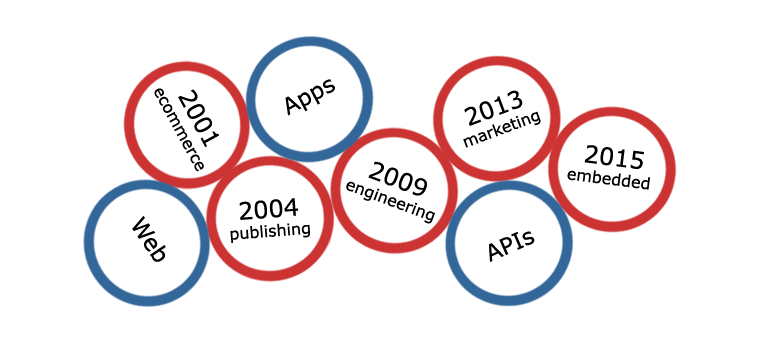
<style>
.page{position:relative;width:760px;height:342px;background:#ffffff}
.page>*{position:absolute;margin:0}
.t1{font:15.9px "Verdana";color:#000000}
.t2{font:23.9px "Verdana";color:#000000}
.t3{font:22.6px "Verdana";color:#000000}
</style>
<div class="page">
<p class="t1" style="left:154px;top:88px;width:65px;height:84px;text-align:center;rotate:61deg"><span class="t2">2001<br></span>ecommerce</p>
<p class="t3" style="left:285px;top:79px;width:50px;height:37px;rotate:-28deg">Apps</p>
<p class="t1" style="left:463px;top:90px;width:78px;height:58px;text-align:center;rotate:-20deg"><span class="t2">2013<br></span>marketing</p>
<p class="t1" style="left:567px;top:145px;width:83px;height:45px;text-align:center;rotate:7deg"><span class="t2">2015<br></span>embedded</p>
<p class="t1" style="left:346px;top:161px;width:89px;height:63px;text-align:center;rotate:20deg"><span class="t2">2009<br></span>engineering</p>
<p class="t1" style="left:230px;top:198px;width:80px;height:45px;text-align:center;rotate:-4deg"><span class="t2">2004<br></span>publishing</p>
<p class="t3" style="left:132px;top:216px;width:34px;height:46px;rotate:56deg">Web</p>
<p class="t3" style="left:488px;top:231px;width:47px;height:31px;rotate:-24deg">APIs</p>
</div>
